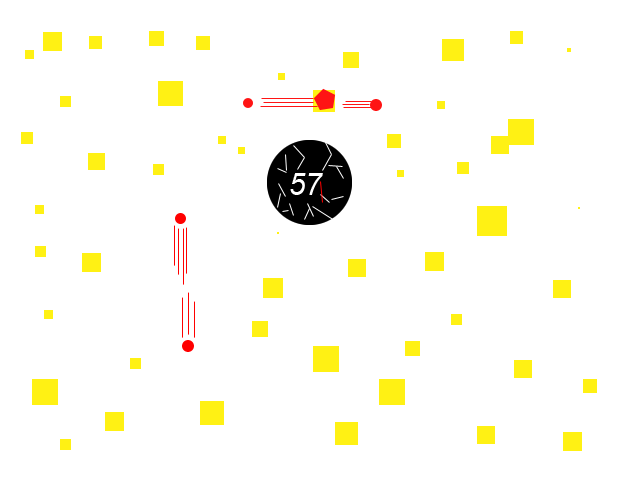
<style>
.page{position:relative;width:640px;height:480px;background:#ffffff}
.page>*{position:absolute;margin:0}
.t1{font:30px "Arial-ItalicMT";color:#ffffff}
</style>
<div class="page">
<p class="t1" style="left:290px;top:173px;width:33px;height:22px">57</p>
</div>
